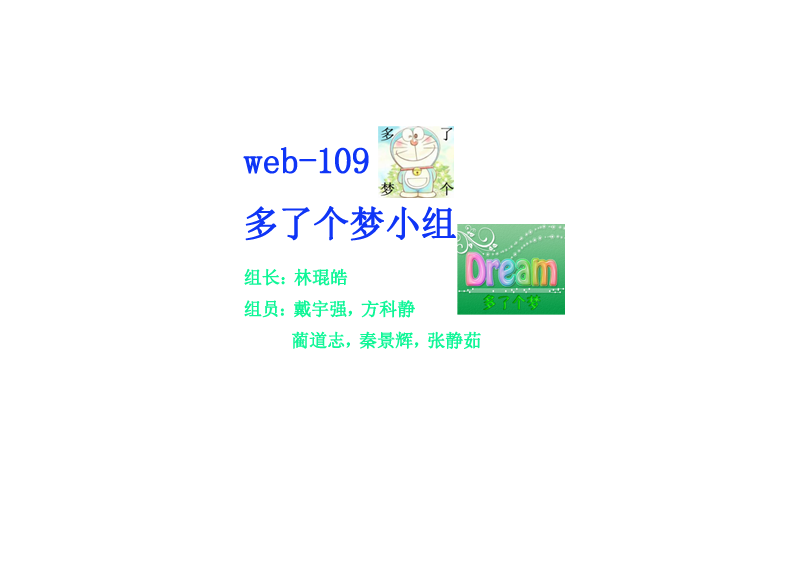
<style>
.page{position:relative;width:793px;height:562px;background:#ffffff}
.page>*{position:absolute;margin:0}
.t1{font:18px "SimSun";color:#0ff697;font-weight:bold}
.t2{font:36px "SimSun";color:#0f35f6;font-weight:bold}
</style>
<div class="page">
<p class="t1" style="left:243px;top:147px;width:238px;height:202px"><span class="t2">web-109<br>多了个梦小组<br></span>组长：林琨皓<br>组员：戴宇强，方科静<br>     蔺道志，秦景辉，张静茹</p>
</div>
